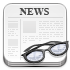
<style>
.page{position:relative;width:70px;height:70px}
.page>*{position:absolute;margin:0}
.t1{font:10px "TimesNewRomanPS-BoldMT";color:#494949}
</style>
<div class="page">
<p class="t1" style="left:19px;top:8px;width:30px;height:7px">NEWS</p>
</div>
